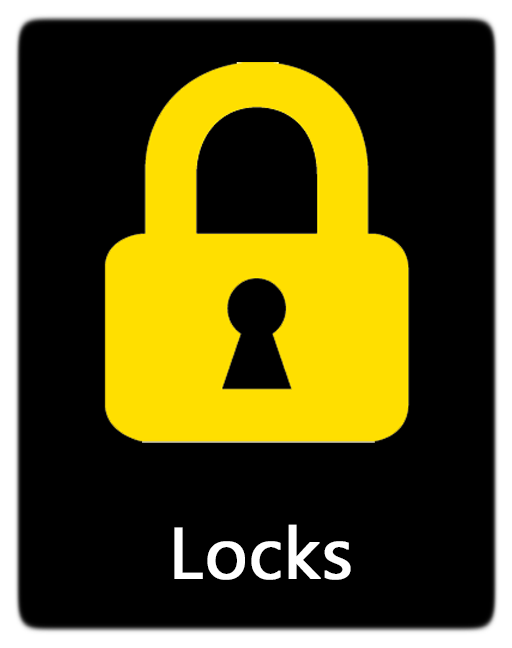
<style>
.page{position:relative;width:512px;height:648px;background:#000000}
.page>*{position:absolute;margin:0}
.t1{font:72px "Gadugi";color:#ffffff;font-weight:bold}
</style>
<div class="page">
<p class="t1" style="left:174px;top:524px;width:177px;height:56px">Locks</p>
</div>
